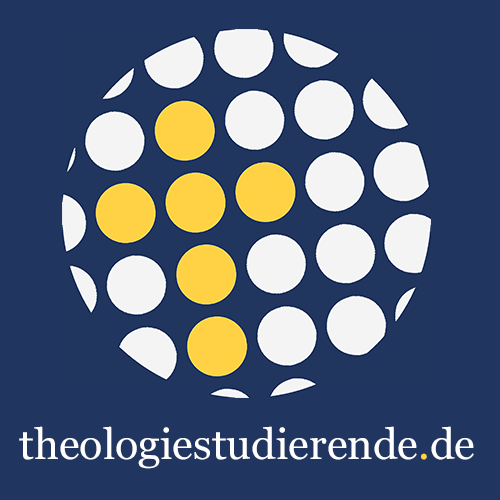
<style>
.page{position:relative;width:500px;height:500px;background:#203560}
.page>*{position:absolute;margin:0}
.t1{font:42.6px "Georgia";color:#ffffff}
.t2{font:42.6px "Georgia";color:#ffd344}
</style>
<div class="page">
<p class="t1" style="left:19px;top:426px;width:455px;height:43px">theologiestudierende<span class="t2">.</span>de</p>
</div>
